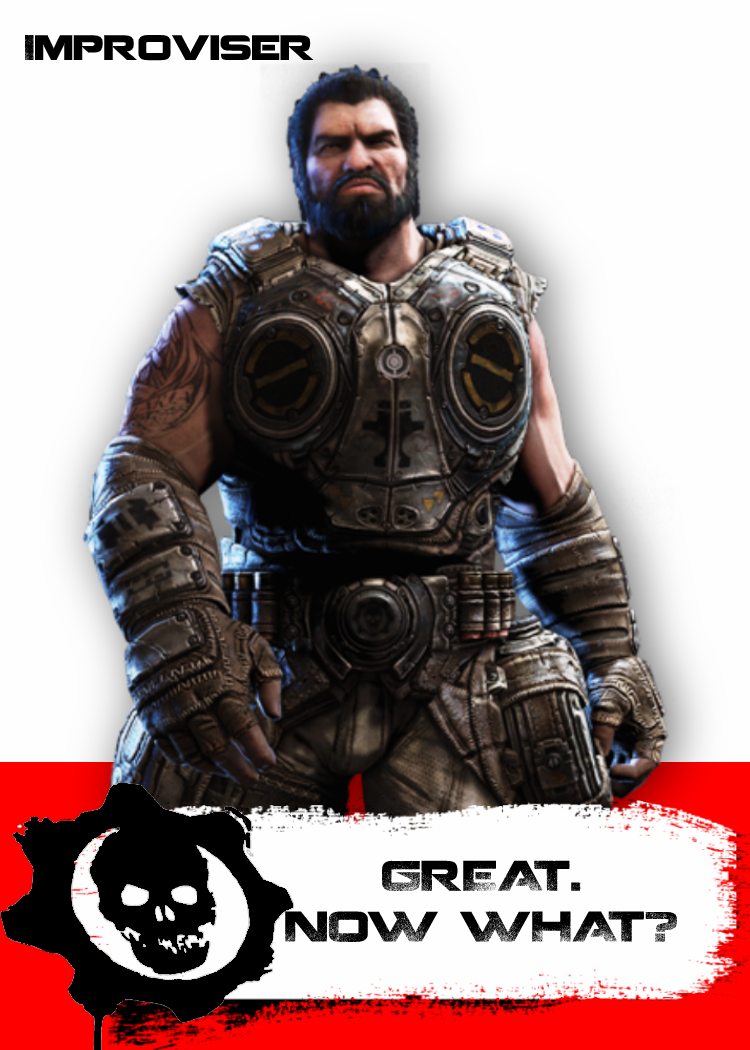
<style>
.page{position:relative;width:750px;height:1050px;background:#fefefe}
.page>*{position:absolute;margin:0}
.t1{font:35px "Coalition";color:#000000}
.t2{font:42.3px "Coalition";color:#000000}
</style>
<div class="page">
<p class="t1" style="left:24px;top:35px;width:290px;height:26px">Improviser</p>
<p class="t2" style="left:285px;top:860px;width:393px;height:83px;text-align:center">GREAT.<br>NOW WHAT?</p>
</div>
